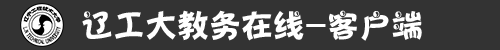
<style>
.page{position:relative;width:500px;height:50px;background:#333333}
.page>*{position:absolute;margin:0}
.t1{font:32px "HYo3gj";color:#ffffff}
.t2{font:32px "¿¬Ìå";color:#000000;font-weight:bold}
</style>
<div class="page">
<p class="t1" style="left:82px;top:10px;width:340px;height:31px"><span class="t2">     </span>辽工大教务在线-客户端</p>
</div>
